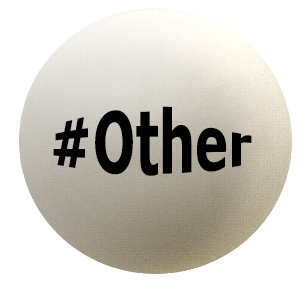
<style>
.page{position:relative;width:306px;height:290px;background:#ffffff}
.page>*{position:absolute;margin:0}
.t1{font:50px "Verdana-Bold";color:#000000}
</style>
<div class="page">
<p class="t1" style="left:53px;top:106px;width:199px;height:70px">#Other</p>
</div>
